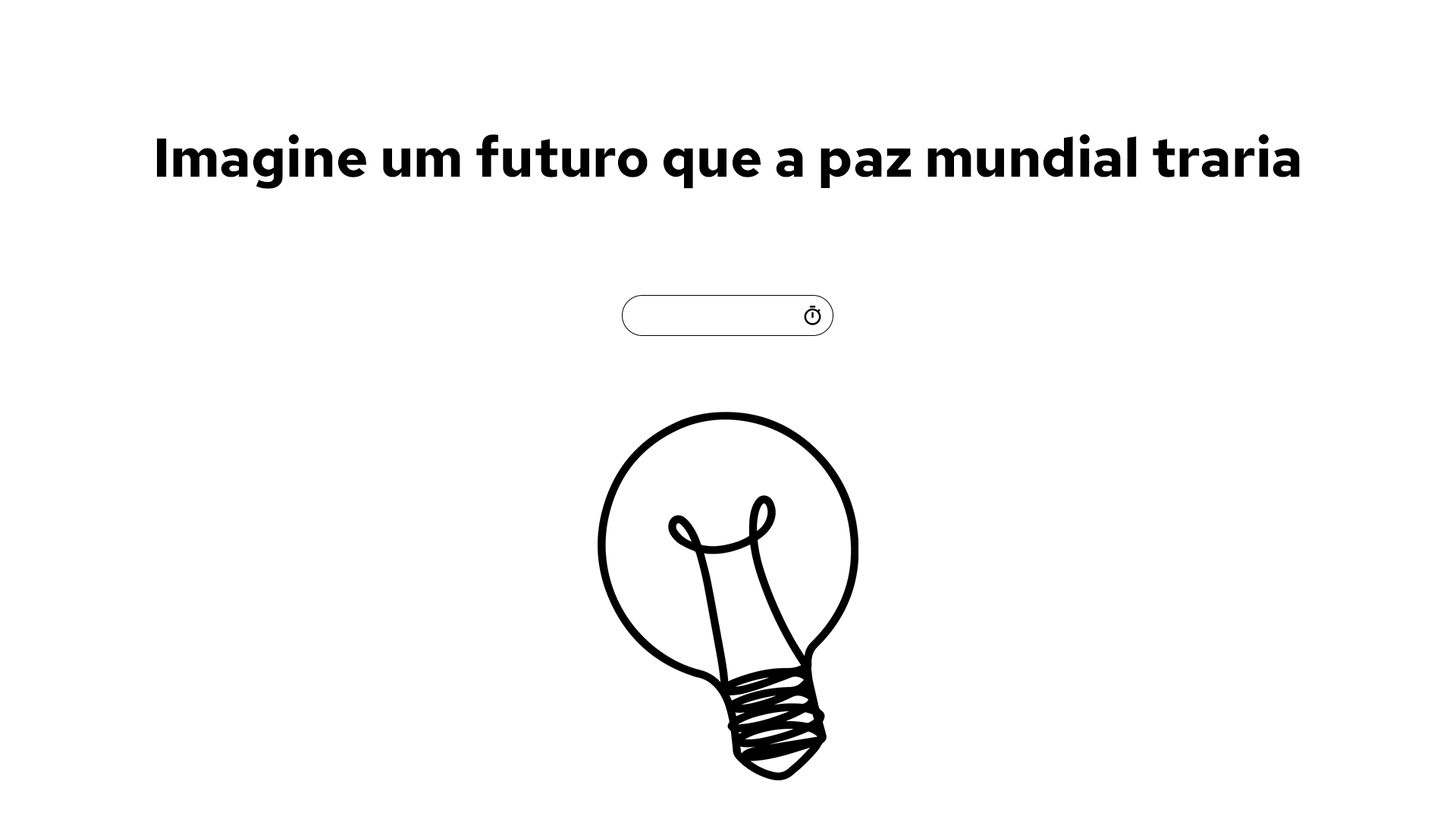
<style>
.page{position:relative;width:1456px;height:819px;background:#ffffff}
.page>*{position:absolute;margin:0}
.t1{font:54.6px "RedHatText-Bold";color:#000000}
</style>
<div class="page">
<p class="t1" style="left:157px;top:134px;width:1143px;height:55px">Imagine um futuro que a paz mundial traria</p>
</div>
